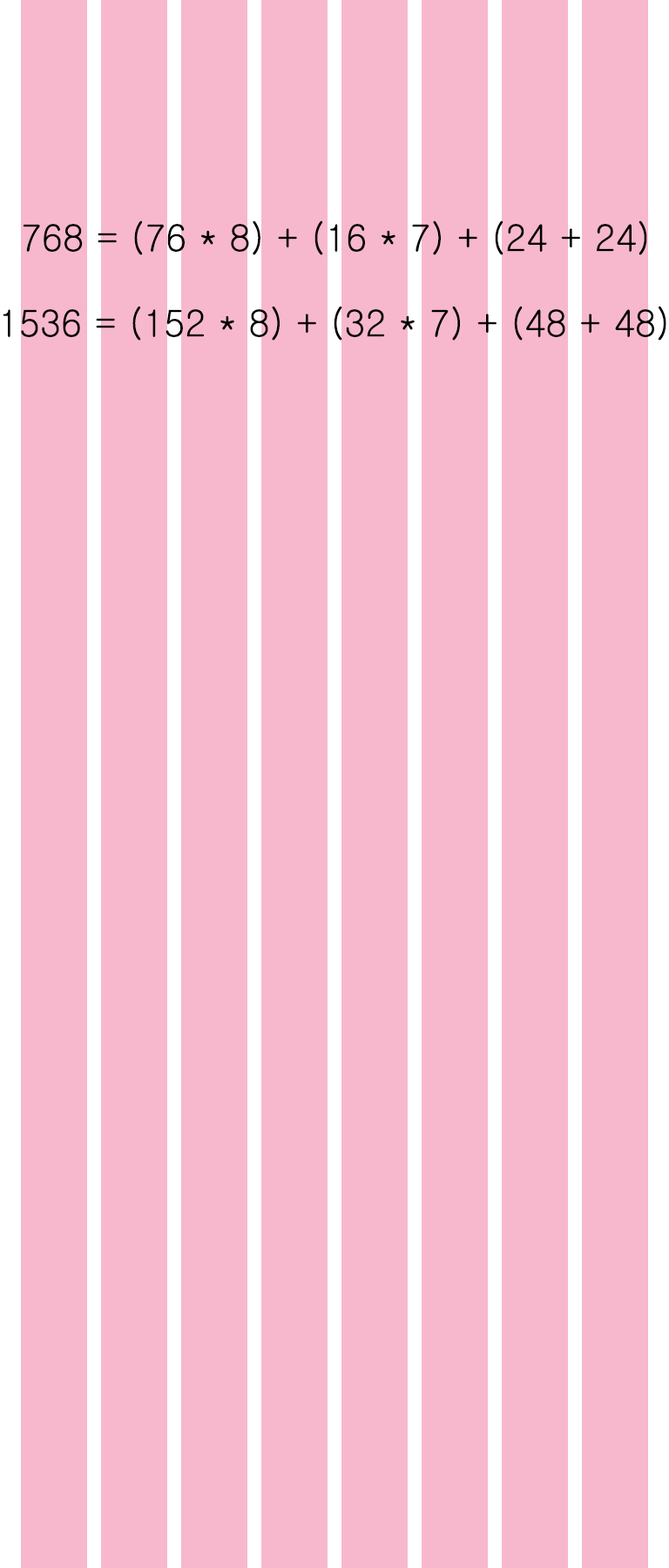
<style>
.page{position:relative;width:669px;height:1568px;background:#f7b8ce}
.page>*{position:absolute;margin:0}
.t1{font:36.6px "Gulim";color:#000000}
</style>
<div class="page">
<p class="t1" style="left:23px;top:220px;width:624px;height:35px">768 = (76 * 8) + (16 * 7) + (24 + 24)</p>
<p class="t1" style="left:3px;top:306px;width:663px;height:35px">1536 = (152 * 8) + (32 * 7) + (48 + 48)</p>
</div>
